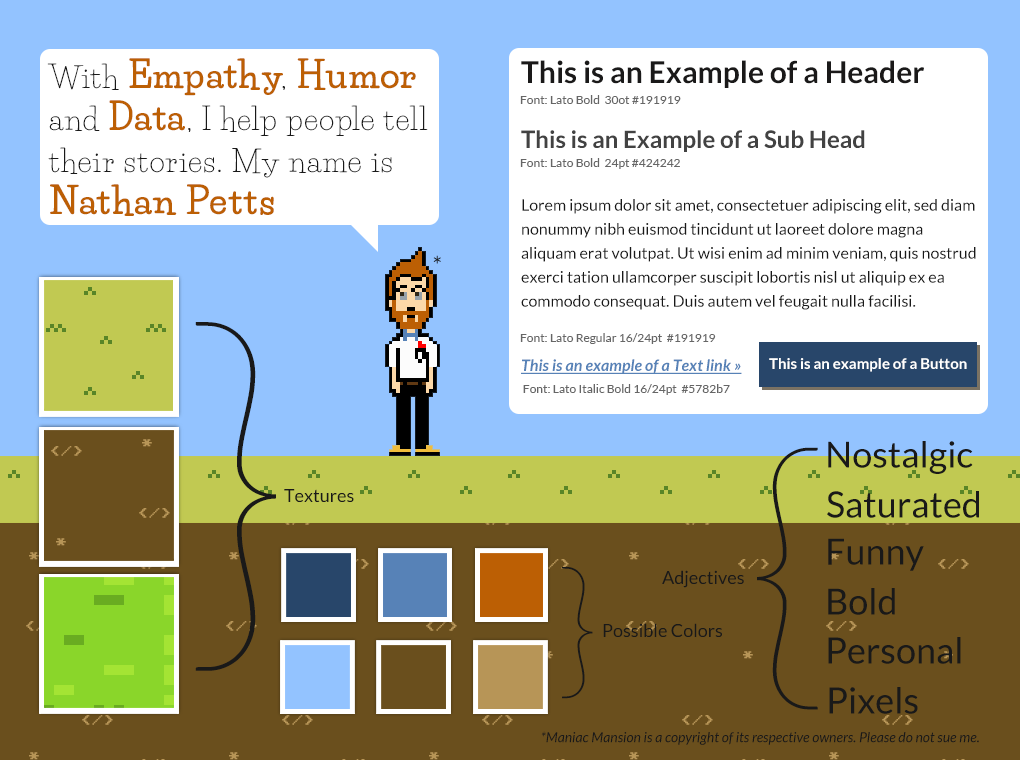
<style>
.page{position:relative;width:1020px;height:760px;background:#ffffff}
.page>*{position:absolute;margin:0}
.t1{font:30px/42px "LifeSavers-Regular";letter-spacing:0.042em;color:#191919}
.t2{font:36px/42px "LifeSavers-ExtraBold";letter-spacing:0.042em;color:#bc5f04}
.t3{font:30px "Lato-Bold";color:#1a1919}
.t4{font:12px "Lato-Regular";color:#666666}
.t5{font:24px "Lato-Bold";color:#424242}
.t6{font:16px/24px "Lato-Regular";color:#191919}
.t7{font:24px "Lato-Regular";color:#191919}
.t8{font:400px "Lato-Hairline";color:#191919}
.t9{font:16px "Lato-BoldItalic";color:#5782b7;text-decoration:underline}
.t10{font:15px "Lato-Bold";color:#ffffff}
.t11{font:300px "Lato-Hairline";color:#191919}
.t12{font:36px "Lato-Regular";color:#191919}
.t13{font:18px "Lato-Regular";color:#191919}
.t14{font:150px "Lato-Hairline";color:#191919}
.t15{font:14px "Lato-Italic";color:#191919}
</style>
<div class="page">
<p class="t1" style="left:47px;top:58px;width:381px;height:158px">With <span class="t2">Empathy</span>, <span class="t2">Humor </span>and <span class="t2">Data</span>, I help people tell their stories. My name is <span class="t2">Nathan Petts</span></p>
<p class="t3" style="left:521px;top:60px;width:403px;height:28px">This is an Example of a Header</p>
<p class="t4" style="left:520px;top:95px;width:161px;height:9px">Font: Lato Bold  30ot #191919</p>
<p class="t5" style="left:521px;top:130px;width:344px;height:22px">This is an Example of a Sub Head</p>
<p class="t4" style="left:520px;top:158px;width:160px;height:11px">Font: Lato Bold  24pt #424242</p>
<p class="t6" style="left:521px;top:199px;width:455px;height:111px">Lorem ipsum dolor sit amet, consectetuer adipiscing elit, sed diam nonummy nibh euismod tincidunt ut laoreet dolore magna aliquam erat volutpat. Ut wisi enim ad minim veniam, quis nostrud exerci tation ullamcorper suscipit lobortis nisl ut aliquip ex ea commodo consequat. Duis autem vel feugait nulla facilisi.</p>
<p class="t7" style="left:433px;top:255px;width:8px;height:9px">*</p>
<p class="t8" style="left:195px;top:322px;width:81px;height:349px">}</p>
<p class="t4" style="left:520px;top:333px;width:196px;height:11px">Font: Lato Regular 16/24pt  #191919</p>
<p class="t9" style="left:521px;top:359px;width:221px;height:15px">This is an example of a Text link »</p>
<p class="t10" style="left:769px;top:358px;width:198px;height:14px">This is an example of a Button</p>
<p class="t4" style="left:523px;top:384px;width:207px;height:11px">Font: Lato Italic Bold 16/24pt  #5782b7</p>
<p class="t11" style="left:757px;top:447px;width:61px;height:263px">{</p>
<p class="t12" style="left:828px;top:441px;width:145px;height:33px">Nostalgic</p>
<p class="t13" style="left:284px;top:489px;width:70px;height:13px">Textures</p>
<p class="t12" style="left:827px;top:491px;width:152px;height:27px">Saturated</p>
<p class="t12" style="left:828px;top:538px;width:96px;height:33px">Funny</p>
<p class="t14" style="left:562px;top:567px;width:31px;height:132px">}</p>
<p class="t13" style="left:662px;top:570px;width:82px;height:18px">Adjectives</p>
<p class="t12" style="left:828px;top:588px;width:67px;height:27px">Bold</p>
<p class="t13" style="left:603px;top:623px;width:119px;height:14px">Possible Colors</p>
<p class="t12" style="left:828px;top:637px;width:133px;height:27px">Personal</p>
<p class="t12" style="left:829px;top:687px;width:89px;height:27px">Pixels</p>
<p class="t15" style="left:541px;top:731px;width:438px;height:14px">*Maniac Mansion is a copyright of its respective owners. Please do not sue me.</p>
</div>
